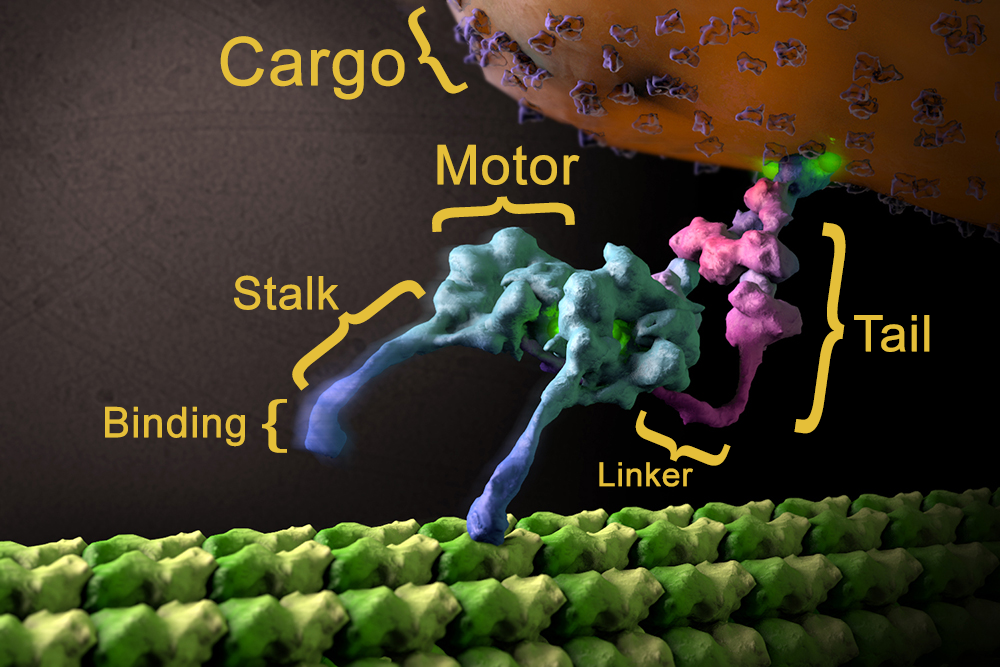
<style>
.page{position:relative;width:1000px;height:667px}
.page>*{position:absolute;margin:0}
.t1{font:104px "AvenirNextCondensed-Regular";color:#e5bf39;scale:1.38 1}
.t2{font:66.7px "ArialMT";color:#e5bf39;font-weight:bold}
.t3{font:54.2px "ArialMT";color:#e5bf39;font-weight:bold}
.t4{font:160px "AvenirNextCondensed-Regular";color:#e5bf39;scale:0.95 1}
.t5{font:238px "AvenirNextCondensed-Regular";color:#e5bf39;scale:0.7 1}
.t6{font:45.8px "ArialMT";color:#e5bf39;font-weight:bold}
.t7{font:178px "AvenirNextCondensed-Regular";color:#e5bf39;scale:0.93 1}
.t8{font:50px "ArialMT";color:#e5bf39;font-weight:bold}
.t9{font:60px "AvenirNextCondensed-Regular";color:#e5bf39;scale:2 1}
.t10{font:41.7px "ArialMT";color:#e5bf39;font-weight:bold}
.t11{font:108px "AvenirNextCondensed-Regular";color:#e5bf39;scale:1.54 1}
.t12{font:33.3px "ArialMT";color:#e5bf39;font-weight:bold}
</style>
<div class="page">
<p class="t1" style="left:408px;top:6px;width:60px;height:88px;rotate:-29deg">{</p>
<p class="t2" style="left:220px;top:36px;width:185px;height:64px">Cargo</p>
<p class="t3" style="left:437px;top:144px;width:143px;height:41px">Motor</p>
<p class="t4" style="left:432px;top:196px;width:143px;height:36px;rotate:87deg">{</p>
<p class="t5" style="left:794px;top:222px;width:52px;height:212px;rotate:-172deg">{</p>
<p class="t6" style="left:234px;top:275px;width:105px;height:35px">Stalk</p>
<p class="t7" style="left:292px;top:280px;width:134px;height:111px;rotate:52deg">{</p>
<p class="t8" style="left:854px;top:315px;width:76px;height:37px">Tail</p>
<p class="t9" style="left:262px;top:399px;width:25px;height:54px">{</p>
<p class="t10" style="left:105px;top:406px;width:140px;height:41px">Binding</p>
<p class="t11" style="left:635px;top:410px;width:96px;height:56px;rotate:-68deg">{</p>
<p class="t12" style="left:599px;top:462px;width:94px;height:25px">Linker</p>
</div>
